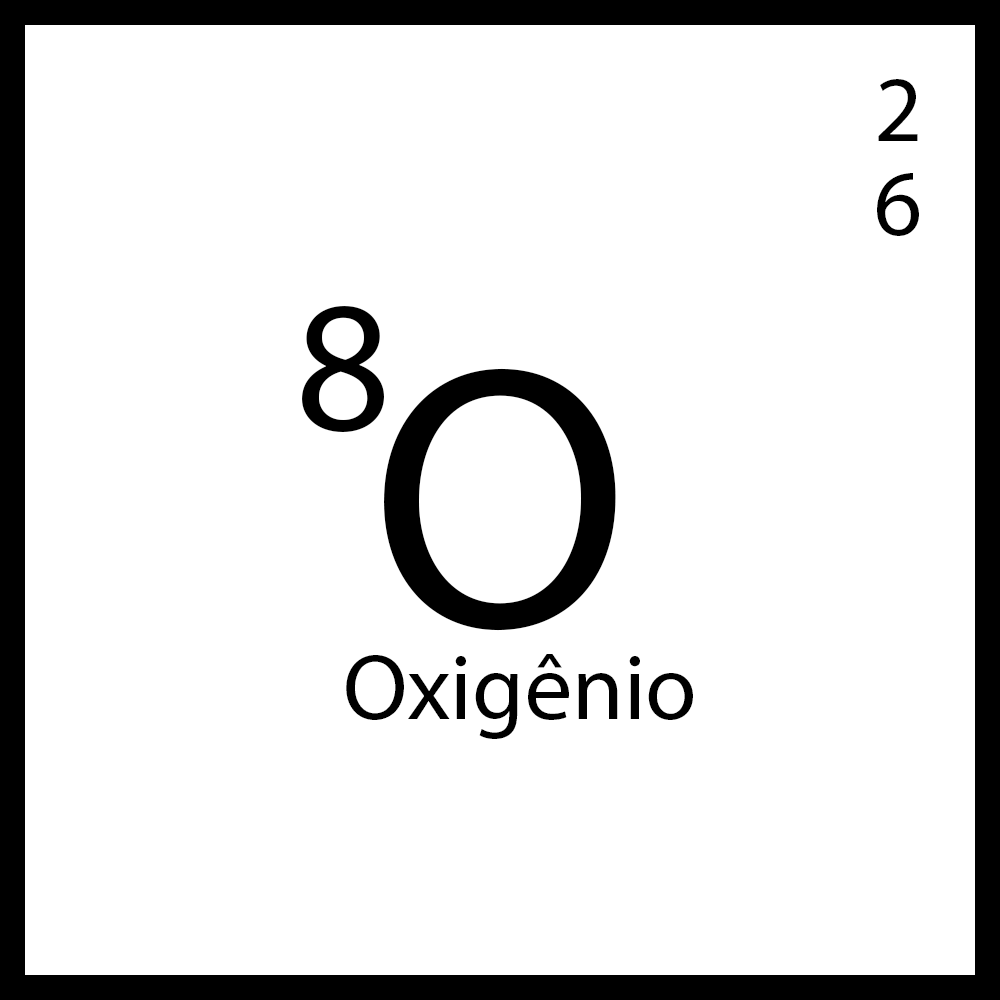
<style>
.page{position:relative;width:1000px;height:1000px;background:#ffffff}
.page>*{position:absolute;margin:0}
.t1{font:93.8px "MyriadPro-Regular";color:#000000}
.t2{font:187.5px "MyriadPro-Regular";color:#000000}
.t3{font:375px "MyriadPro-Regular";color:#000000}
</style>
<div class="page">
<p class="t1" style="left:877px;top:79px;width:42px;height:157px">26</p>
<p class="t2" style="left:302px;top:306px;width:82px;height:126px">8</p>
<p class="t3" style="left:384px;top:368px;width:232px;height:263px">O</p>
<p class="t1" style="left:346px;top:654px;width:347px;height:85px">Oxigênio</p>
</div>
